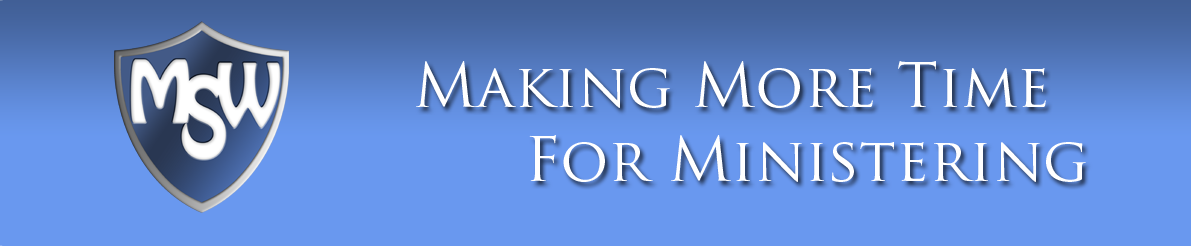
<style>
.page{position:relative;width:1191px;height:246px;background:#6998ef}
.page>*{position:absolute;margin:0}
.t1{font:60px "TrajanPro-Regular";color:#ffffff;font-variant:small-caps}
</style>
<div class="page">
<p class="t1" style="left:416px;top:61px;width:630px;height:47px">Making More Time</p>
<p class="t1" style="left:529px;top:135px;width:557px;height:47px">For Ministering</p>
</div>
